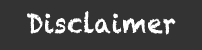
<style>
.page{position:relative;width:202px;height:50px;background:#333333}
.page>*{position:absolute;margin:0}
.t1{font:27px "Chalkduster";letter-spacing:0.02em;color:#ffffff;scale:0.9 1}
</style>
<div class="page">
<p class="t1" style="left:27px;top:11px;width:149px;height:24px">Disclaimer</p>
</div>
